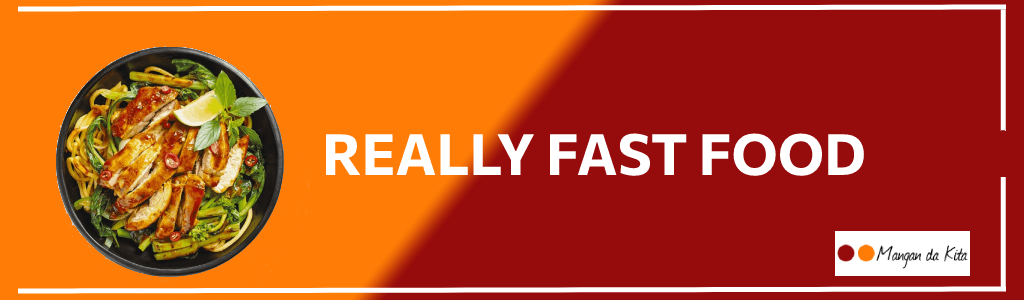
<style>
.page{position:relative;width:1024px;height:300px;background:#960b0b}
.page>*{position:absolute;margin:0}
.t1{font:57px "Commissioner-Bold";color:#ffffff}
</style>
<div class="page">
<p class="t1" style="left:325px;top:133px;width:539px;height:43px">REALLY FAST FOOD</p>
</div>
